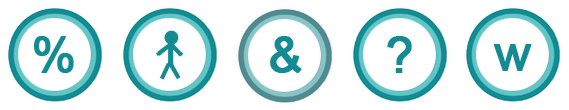
<style>
.page{position:relative;width:569px;height:110px;background:#ffffff}
.page>*{position:absolute;margin:0}
.t1{font:50px "ArialMT";letter-spacing:0.05em;color:#128b92;font-weight:bold}
</style>
<div class="page">
<p class="t1" style="left:34px;top:36px;width:40px;height:37px">%</p>
<p class="t1" style="left:270px;top:36px;width:32px;height:37px">&amp;</p>
<p class="t1" style="left:387px;top:36px;width:25px;height:37px">?</p>
<p class="t1" style="left:494px;top:44px;width:38px;height:27px">w</p>
</div>
